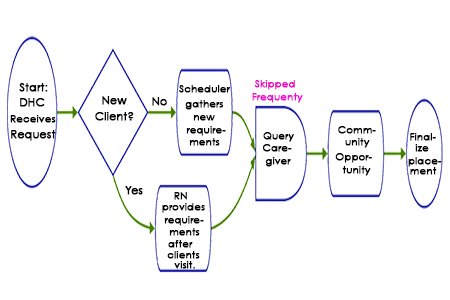
<style>
.page{position:relative;width:450px;height:300px;background:#ffffff}
.page>*{position:absolute;margin:0}
.t1{font:11px "CenturyGothic";color:#000000;font-weight:bold}
.t2{font:10px "CenturyGothic";color:#000000;font-weight:bold}
.t3{font:10px "CenturyGothic";color:#e910c3;font-weight:bold}
.t4{font:10px "CenturyGothic";color:#f40bd0;font-weight:bold}
</style>
<div class="page">
<p class="t1" style="left:19px;top:83px;width:29px;height:9px">Start:</p>
<p class="t2" style="left:179px;top:85px;width:51px;height:8px">Scheduler</p>
<p class="t3" style="left:254px;top:80px;width:41px;height:10px">Skipped</p>
<p class="t1" style="left:20px;top:98px;width:25px;height:9px">DHC</p>
<p class="t1" style="left:102px;top:96px;width:25px;height:9px">New</p>
<p class="t1" style="left:152px;top:97px;width:15px;height:9px">No</p>
<p class="t2" style="left:185px;top:100px;width:38px;height:10px">gathers</p>
<p class="t4" style="left:252px;top:93px;width:51px;height:10px">Frequenty</p>
<p class="t1" style="left:95px;top:112px;width:39px;height:9px">Client?</p>
<p class="t2" style="left:10px;top:115px;width:46px;height:8px">Receives</p>
<p class="t2" style="left:186px;top:126px;width:40px;height:10px">require-</p>
<p class="t2" style="left:193px;top:115px;width:22px;height:6px">new</p>
<p class="t2" style="left:338px;top:126px;width:38px;height:8px">Comm-</p>
<p class="t1" style="left:11px;top:130px;width:45px;height:11px">Request</p>
<p class="t2" style="left:263px;top:132px;width:31px;height:10px">Query</p>
<p class="t2" style="left:410px;top:133px;width:26px;height:8px">Final-</p>
<p class="t2" style="left:189px;top:138px;width:31px;height:8px">ments</p>
<p class="t2" style="left:263px;top:144px;width:29px;height:8px">Care-</p>
<p class="t2" style="left:345px;top:138px;width:25px;height:10px">unity</p>
<p class="t2" style="left:415px;top:144px;width:14px;height:8px">ize</p>
<p class="t2" style="left:265px;top:157px;width:26px;height:10px">giver</p>
<p class="t2" style="left:335px;top:153px;width:37px;height:10px">Oppor-</p>
<p class="t2" style="left:408px;top:157px;width:34px;height:10px">place-</p>
<p class="t2" style="left:342px;top:166px;width:29px;height:10px">tunity</p>
<p class="t2" style="left:410px;top:167px;width:27px;height:8px">ment</p>
<p class="t1" style="left:125px;top:186px;width:18px;height:9px">Yes</p>
<p class="t2" style="left:174px;top:192px;width:13px;height:8px">RN</p>
<p class="t2" style="left:162px;top:203px;width:43px;height:10px">provides</p>
<p class="t2" style="left:164px;top:216px;width:40px;height:10px">require-</p>
<p class="t2" style="left:169px;top:228px;width:31px;height:8px">ments</p>
<p class="t2" style="left:168px;top:240px;width:25px;height:8px">after</p>
<p class="t2" style="left:167px;top:251px;width:33px;height:8px">clients</p>
<p class="t2" style="left:174px;top:261px;width:21px;height:8px">visit.</p>
</div>
